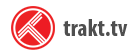
<style>
.page{position:relative;width:140px;height:50px;background:#ffffff}
.page>*{position:absolute;margin:0}
.t1{font:24px "MyriadPro-BoldCond";color:#4f4f4f}
</style>
<div class="page">
<p class="t1" style="left:63px;top:19px;width:65px;height:17px">trakt.tv</p>
</div>
